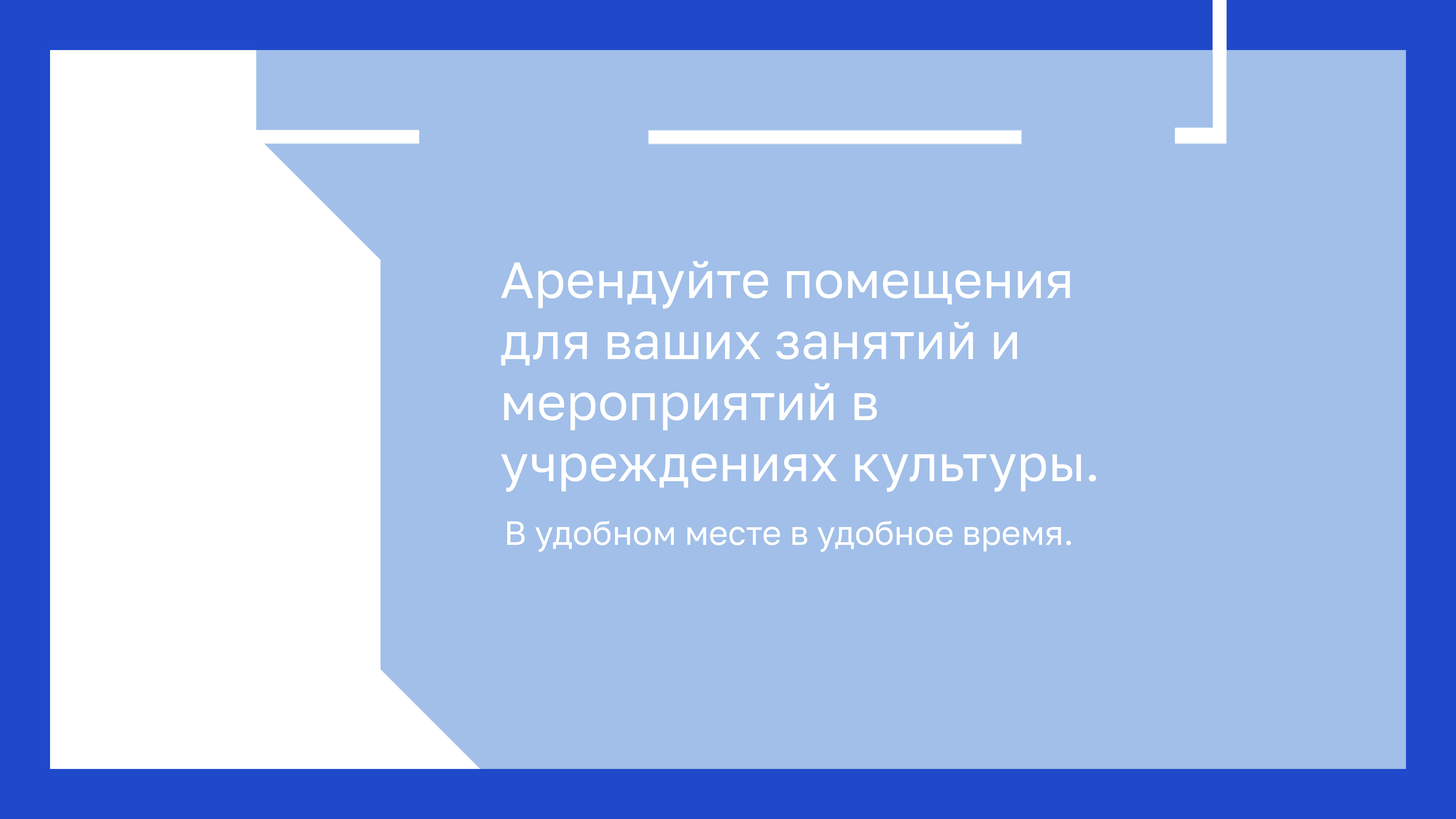
<style>
.page{position:relative;width:1456px;height:819px;background:#a1bfe8}
.page>*{position:absolute;margin:0}
.t1{font:51px "GolosTextVF-Regular";color:#ffffff}
.t2{font:33.3px "GolosTextVF-Regular";color:#ffffff}
</style>
<div class="page">
<p class="t1" style="left:501px;top:261px;width:595px;height:231px">Арендуйте помещения <br>для ваших занятий и <br>мероприятий в <br>учреждениях культуры.</p>
<p class="t2" style="left:507px;top:521px;width:564px;height:31px">В удобном месте в удобное время.</p>
</div>
